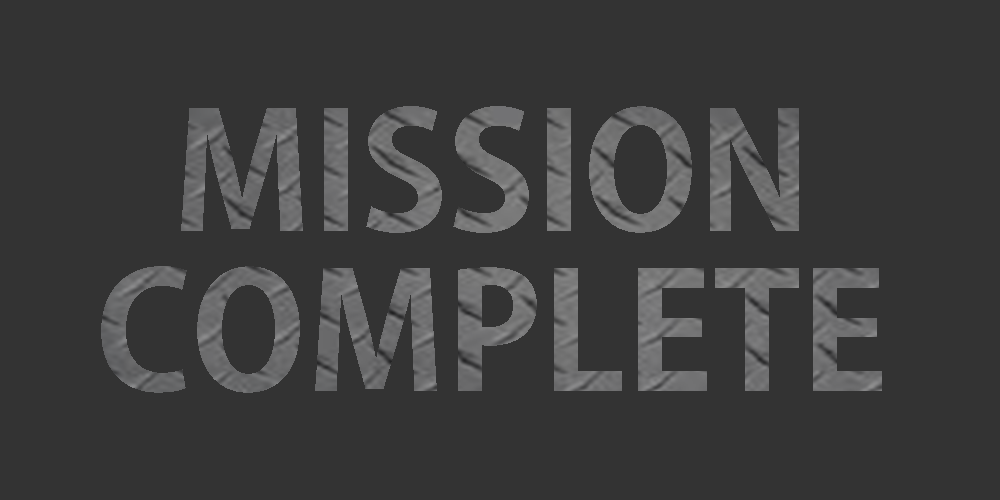
<style>
.page{position:relative;width:1000px;height:500px;background:#333333}
.page>*{position:absolute;margin:0}
.t1{font:160px/160px "AdobeGothicStd-Bold";color:#6f6f6f}
</style>
<div class="page">
<p class="t1" style="left:101px;top:106px;width:781px;height:287px;text-align:center">MISSION<br>COMPLETE</p>
</div>
